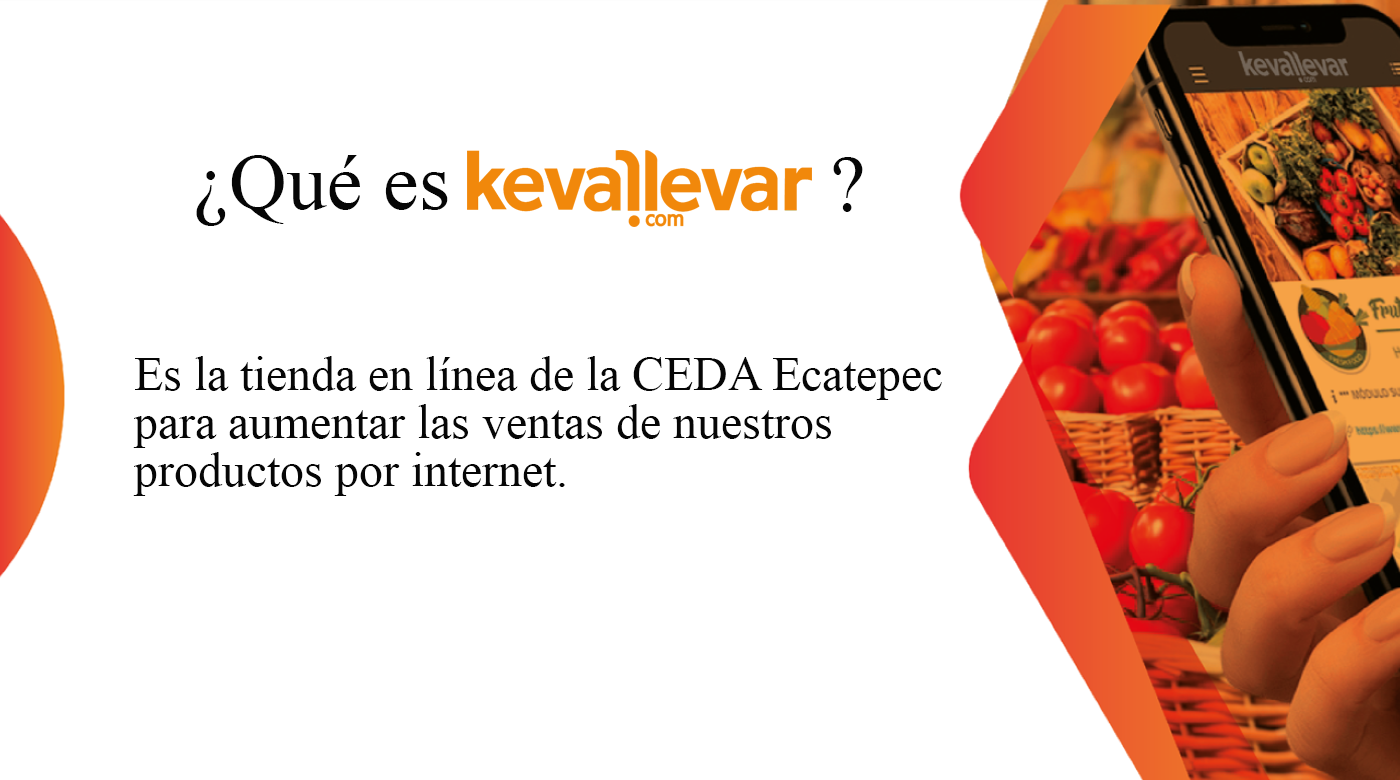
<style>
.page{position:relative;width:1400px;height:780px;background:#ffffff}
.page>*{position:absolute;margin:0}
.t1{font:80px "TimesNewRomanPSMT";color:#060606}
.t2{font:48px/24px "TimesNewRomanPSMT";color:#060606}
</style>
<div class="page">
<p class="t1" style="left:196px;top:155px;width:252px;height:71px">¿Qué es</p>
<p class="t1" style="left:833px;top:157px;width:30px;height:55px">?</p>
<p class="t2" style="left:133px;top:356px;width:809px;height:140px">Es la tienda en línea de la CEDA Ecatepec<br><br>para aumentar las ventas de nuestros <br><br>productos por internet.</p>
</div>
